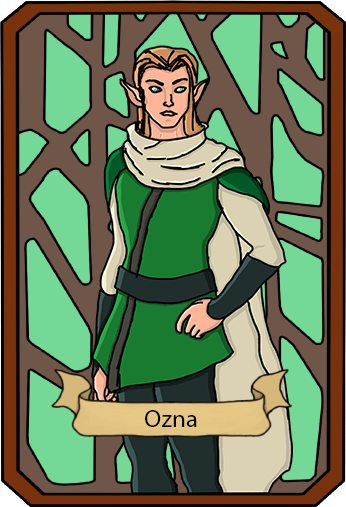
<style>
.page{position:relative;width:346px;height:507px}
.page>*{position:absolute;margin:0}
.t1{font:25px "MyriadPro-Regular";color:#000000}
</style>
<div class="page">
<p class="t1" style="left:145px;top:410px;width:52px;height:17px">Ozna</p>
</div>
